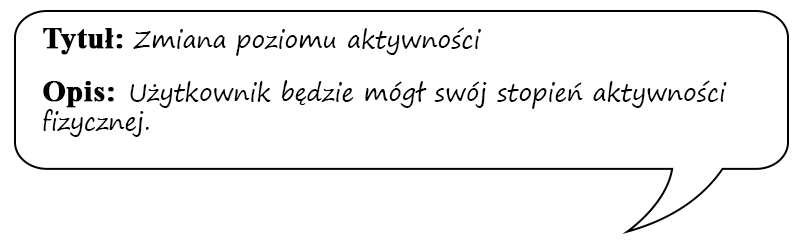
<style>
.page{position:relative;width:800px;height:242px;background:#ffffff}
.page>*{position:absolute;margin:0}
.t1{font:24px "SegoePrint";color:#000000}
.t2{font:30px "TimesNewRomanPS-BoldMT";color:#000000;font-weight:bold}
</style>
<div class="page">
<p class="t1" style="left:43px;top:27px;width:684px;height:110px"><span class="t2">Tytuł: </span>Zmiana poziomu aktywności<br><br><span class="t2">Opis:  </span>Użytkownik będzie mógł swój stopień aktywności fizycznej.</p>
</div>
